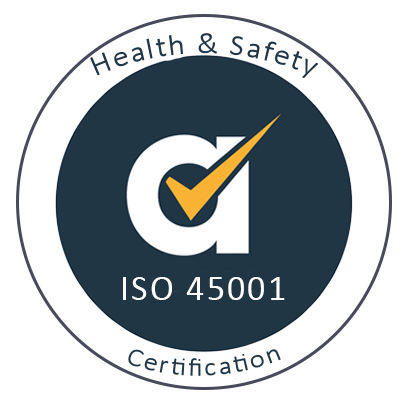
<style>
.page{position:relative;width:408px;height:403px;background:#ffffff}
.page>*{position:absolute;margin:0}
.t1{font:30px "Calibri-Light";letter-spacing:0.06em;color:#213645}
.t2{font:36px "Calibri";letter-spacing:0.06em;color:#ffffff}
.t3{font:26.3px "Calibri-Light";letter-spacing:0.06em;color:#213645}
</style>
<div class="page">
<p class="t1" style="left:90px;top:33px;width:229px;height:46px">Health &amp; Safety</p>
<p class="t2" style="left:123px;top:277px;width:162px;height:23px">ISO 45001</p>
<p class="t3" style="left:128px;top:349px;width:153px;height:27px;rotate:-2deg">Certification</p>
</div>
